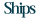
<style>
.page{position:relative;width:36px;height:18px;background:#ffffff}
.page>*{position:absolute;margin:0}
.t1{font:16px "HeiseiMinStd-W7";letter-spacing:-0.09em;color:#073c4d}
</style>
<div class="page">
<p class="t1" style="left:4px;top:1px;width:32px;height:17px">Ships</p>
</div>
